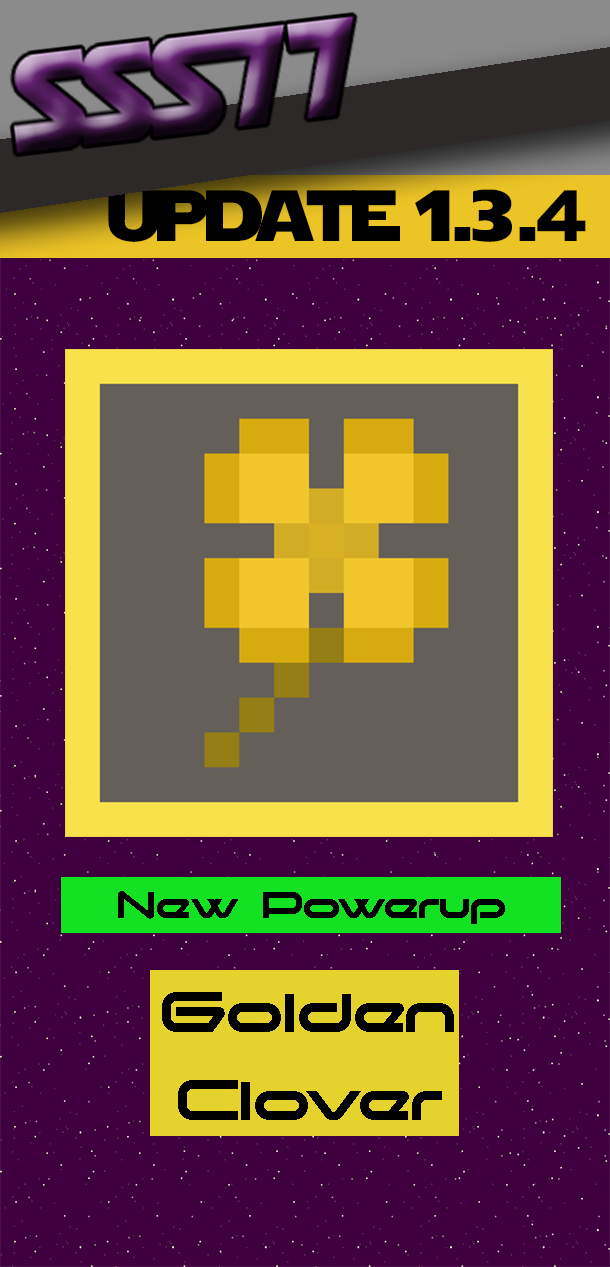
<style>
.page{position:relative;width:610px;height:1267px;background:#400040}
.page>*{position:absolute;margin:0}
.t1{font:72px "StarJedi";color:#000000}
.t2{font:48px "moonhouse";color:#000000}
.t3{font:72.9px "moonhouse";color:#000000}
</style>
<div class="page">
<p class="t1" style="left:108px;top:189px;width:478px;height:53px">update 1.3.4</p>
<p class="t2" style="left:118px;top:891px;width:387px;height:33px">New Powerup</p>
<p class="t3" style="left:162px;top:992px;width:292px;height:128px;text-align:center">Golden<br>Clover</p>
</div>
